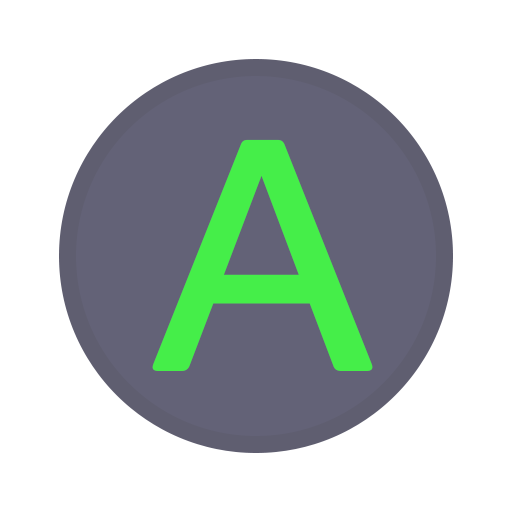
<style>
.page{position:relative;width:512px;height:512px;background:#ffffff}
.page>*{position:absolute;margin:0}
.t1{font:339.8px "Alpino-Medium";color:#45ee49}
</style>
<div class="page">
<p class="t1" style="left:152px;top:139px;width:221px;height:232px">A</p>
</div>
